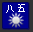
<style>
.page{position:relative;width:33px;height:32px;background:#000090}
.page>*{position:absolute;margin:0}
.t1{font:10.4px "SimSun";color:#ffffff}
</style>
<div class="page">
<p class="t1" style="left:6px;top:4px;width:19px;height:9px">八五</p>
</div>
